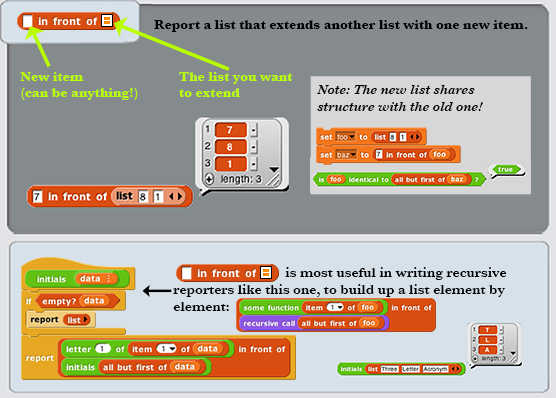
<style>
.page{position:relative;width:556px;height:398px;background:#858a8c}
.page>*{position:absolute;margin:0}
.t1{font:14px "Baskerville-Bold";color:#000000}
.t2{font:14px "Baskerville-Bold";color:#b9ff00}
.t3{font:14px "Baskerville-SemiBoldItalic";color:#000000}
.t4{font:14px "Baskerville-SemiBold";color:#000000}
</style>
<div class="page">
<p class="t1" style="left:154px;top:20px;width:374px;height:12px">Report a list that extends another list with one new item.</p>
<p class="t2" style="left:20px;top:72px;width:118px;height:28px">New item<br>(can be anything!)</p>
<p class="t2" style="left:179px;top:72px;width:114px;height:25px">The list you want<br>to extend</p>
<p class="t3" style="left:317px;top:85px;width:166px;height:26px">Note: The new list shares<br>structure with the old one!</p>
<p class="t4" style="left:173px;top:267px;width:334px;height:44px">is most useful in writing recursive<br>reporters like this one, to build up a list element by<br>element:</p>
</div>
